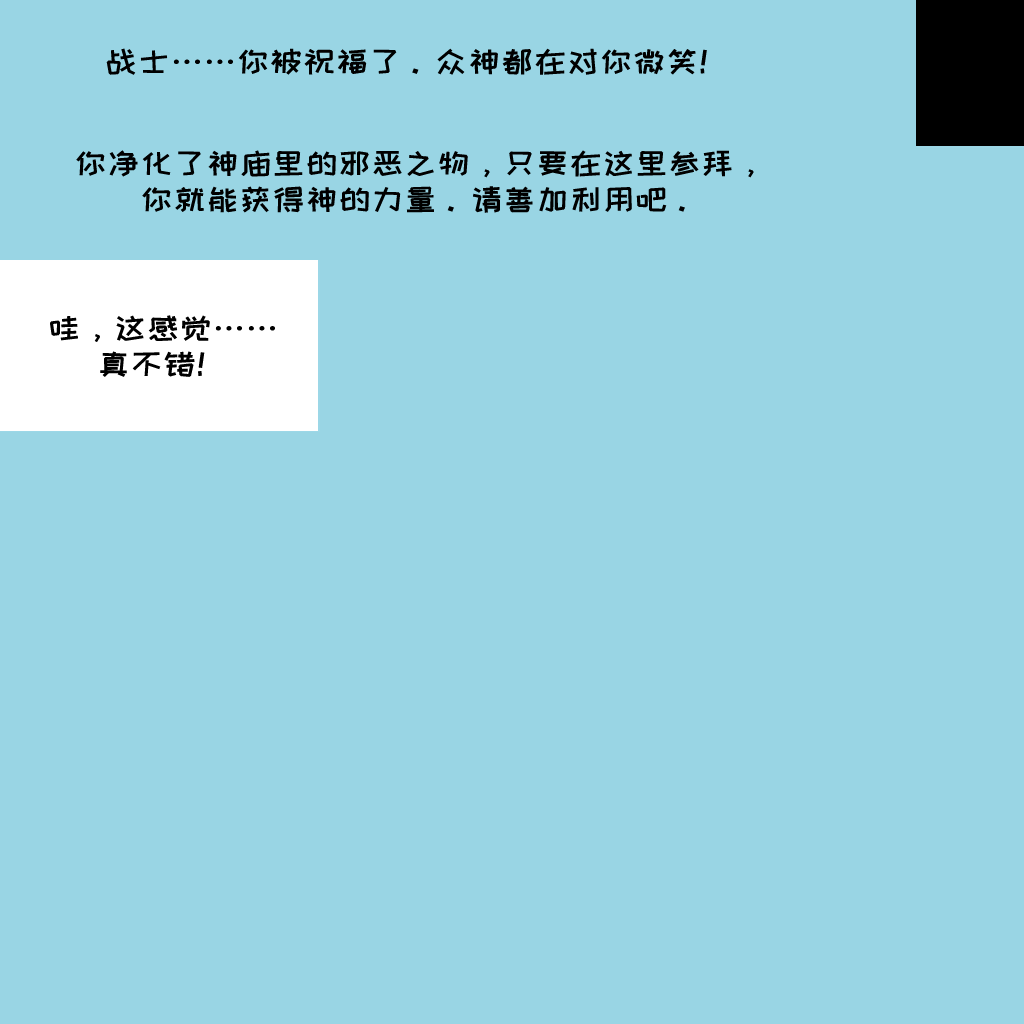
<style>
.page{position:relative;width:1024px;height:1024px;background:#99d5e4}
.page>*{position:absolute;margin:0}
.t1{font:30px "HappyZcool-2016";color:#000000;scale:1.1 1}
.t2{font:30px/36px "HappyZcool-2016";color:#000000;scale:1.1 1}
</style>
<div class="page">
<p class="t1" style="left:106px;top:48px;width:601px;height:27px">战士……你被祝福了。众神都在对你微笑！</p>
<p class="t2" style="left:76px;top:150px;width:678px;height:63px;text-align:center">你净化了神庙里的邪恶之物，只要在这里参拜，<br>你就能获得神的力量。请善加利用吧。</p>
<p class="t2" style="left:50px;top:315px;width:225px;height:62px;text-align:center">哇，这感觉……<br>真不错！</p>
</div>
